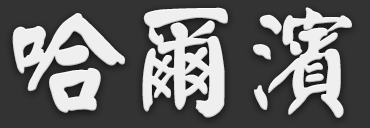
<style>
.page{position:relative;width:370px;height:128px;background:#333333}
.page>*{position:absolute;margin:0}
.t1{font:117px "¾­µä·±ÑÕÌå Regular";color:#ffffff}
</style>
<div class="page">
<p class="t1" style="left:12px;top:7px;width:340px;height:111px">哈尔滨</p>
</div>
